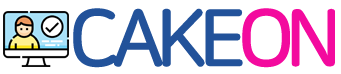
<style>
.page{position:relative;width:341px;height:74px;background:#ffffff}
.page>*{position:absolute;margin:0}
.t1{font:80px "NanumSquareRoundB";letter-spacing:-0.12em;color:#22529a}
.t2{font:80px "NanumSquareRoundB";letter-spacing:-0.12em;color:#f30a9e}
</style>
<div class="page">
<p class="t1" style="left:73px;top:8px;width:262px;height:60px">CAKE<span class="t2">ON</span></p>
</div>
